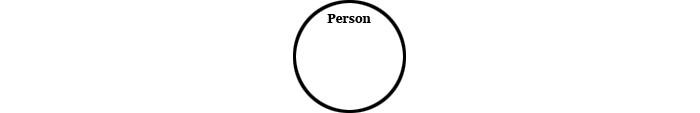
<style>
.page{position:relative;width:700px;height:113px;background:#ffffff}
.page>*{position:absolute;margin:0}
.t1{font:12px "Georgia-Bold";color:#000000}
</style>
<div class="page">
<p class="t1" style="left:327px;top:14px;width:44px;height:9px">Person</p>
</div>
